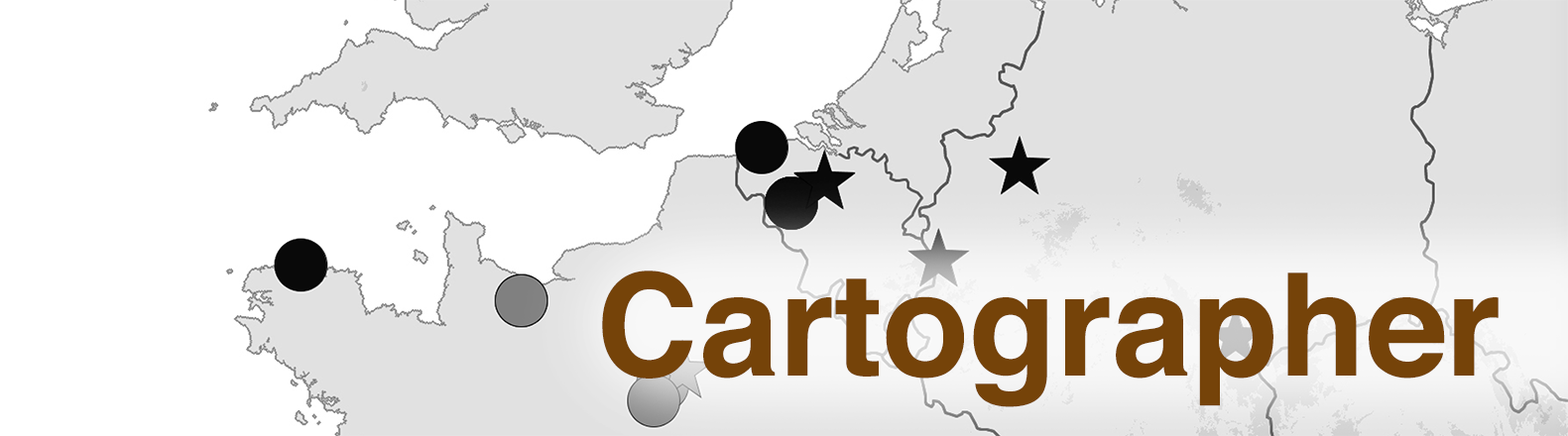
<style>
.page{position:relative;width:1568px;height:436px;background:#ffffff}
.page>*{position:absolute;margin:0}
.t1{font:142.8px "Helvetica-Bold";color:#754309}
</style>
<div class="page">
<p class="t1" style="left:602px;top:271px;width:897px;height:137px">Cartographer</p>
</div>
